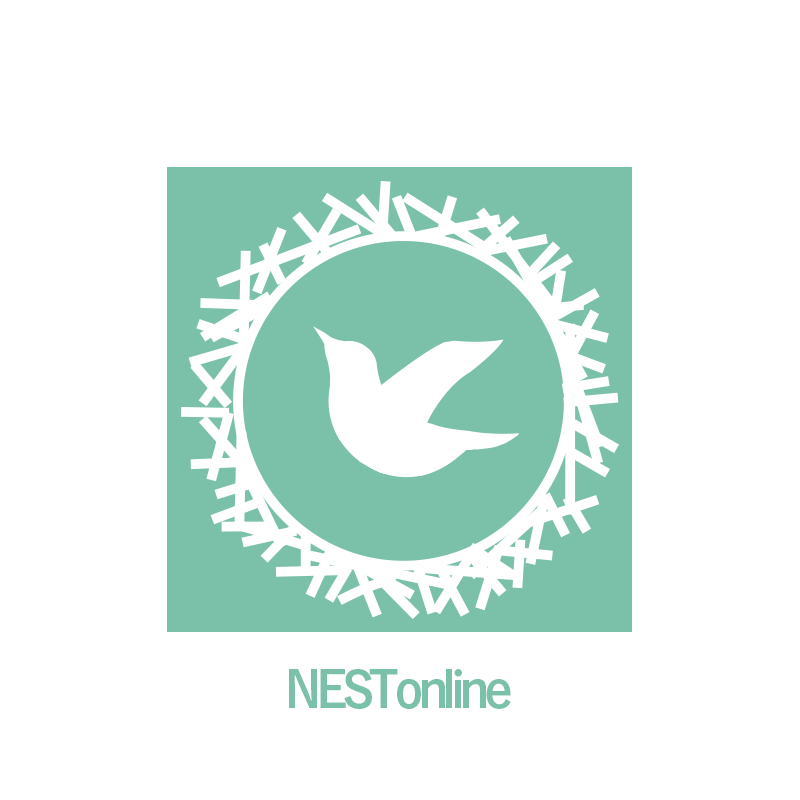
<style>
.page{position:relative;width:800px;height:800px;background:#ffffff}
.page>*{position:absolute;margin:0}
.t1{font:50px "KoburinaGoStd-W6";letter-spacing:-0.08em;color:#7bc1a9}
</style>
<div class="page">
<p class="t1" style="left:289px;top:669px;width:222px;height:40px">NESTonline</p>
</div>
